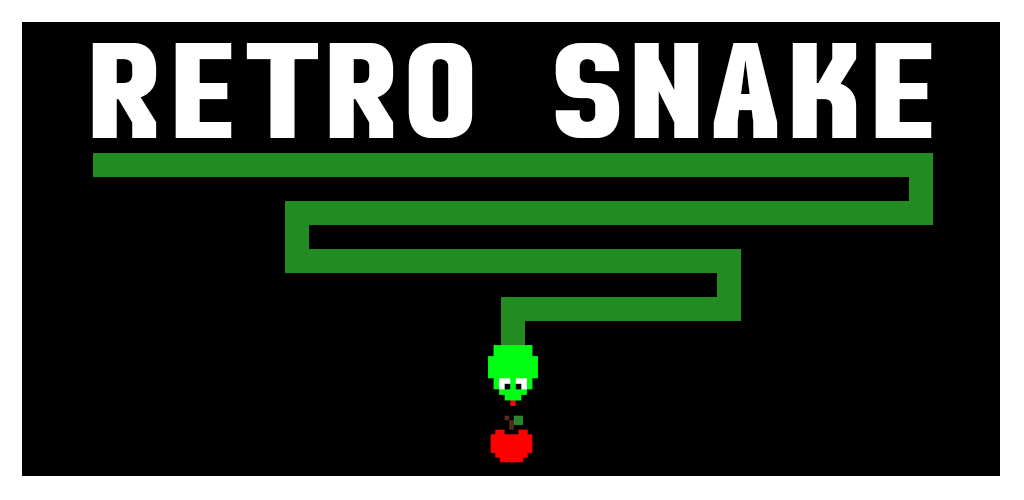
<style>
.page{position:relative;width:1024px;height:500px;background:#000000}
.page>*{position:absolute;margin:0}
.t1{font:150px "AudimatMonoBold";color:#ffffff}
</style>
<div class="page">
<p class="t1" style="left:92px;top:43px;width:381px;height:95px">RETRO</p>
<p class="t1" style="left:555px;top:43px;width:377px;height:95px">SNAKE</p>
</div>
